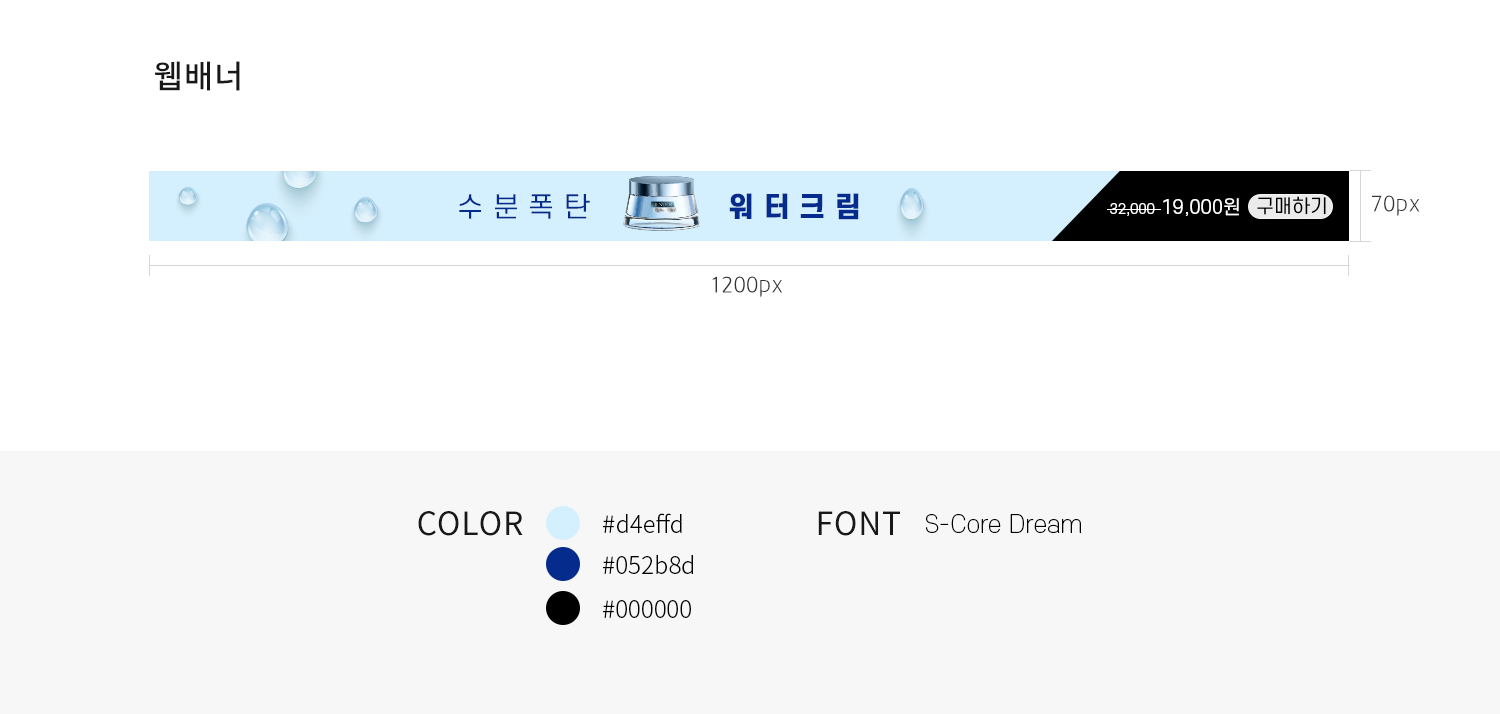
<style>
.page{position:relative;width:1500px;height:714px;background:#ffffff}
.page>*{position:absolute;margin:0}
.t1{font:32px "NotoSansCJKkr-Medium";letter-spacing:0.025em;color:#181818}
.t2{font:23.1px "12LotteMartDreamLight";letter-spacing:0.025em;color:#333333}
.t3{font:32px "NotoSansCJKkr-Regular";letter-spacing:0.025em;color:#181818}
.t4{font:24px "NotoSansCJKkr-Light";color:#010101}
.t5{font:24px "S-CoreDream-2ExtraLight";color:#010101}
</style>
<div class="page">
<p class="t1" style="left:155px;top:61px;width:85px;height:30px">웹배너</p>
<p class="t2" style="left:1372px;top:195px;width:48px;height:21px">70px</p>
<p class="t2" style="left:712px;top:276px;width:70px;height:21px">1200px</p>
<p class="t3" style="left:418px;top:511px;width:105px;height:25px">COLOR</p>
<p class="t4" style="left:603px;top:513px;width:79px;height:20px">#d4effd</p>
<p class="t3" style="left:818px;top:511px;width:82px;height:25px">FONT</p>
<p class="t5" style="left:926px;top:514px;width:155px;height:19px">S-Core Dream</p>
<p class="t4" style="left:603px;top:555px;width:90px;height:19px">#052b8d</p>
<p class="t4" style="left:603px;top:600px;width:88px;height:18px">#000000</p>
</div>
